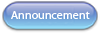
<style>
.page{position:relative;width:100px;height:33px}
.page>*{position:absolute;margin:0}
.t1{font:11.9px "MyriadPro-Regular";color:#ffffff}
</style>
<div class="page">
<p class="t1" style="left:11px;top:11px;width:79px;height:8px">Announcement</p>
</div>
